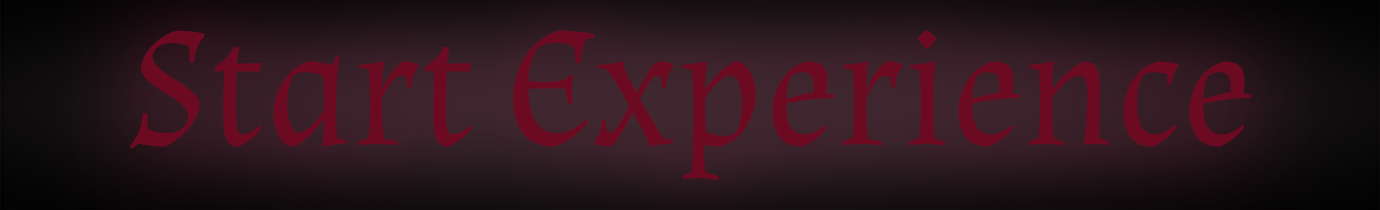
<style>
.page{position:relative;width:1380px;height:210px}
.page>*{position:absolute;margin:0}
.t1{font:170px "Almendra-Regular";color:#6c0a21}
</style>
<div class="page">
<p class="t1" style="left:129px;top:30px;width:1123px;height:151px">Start Experience</p>
</div>
